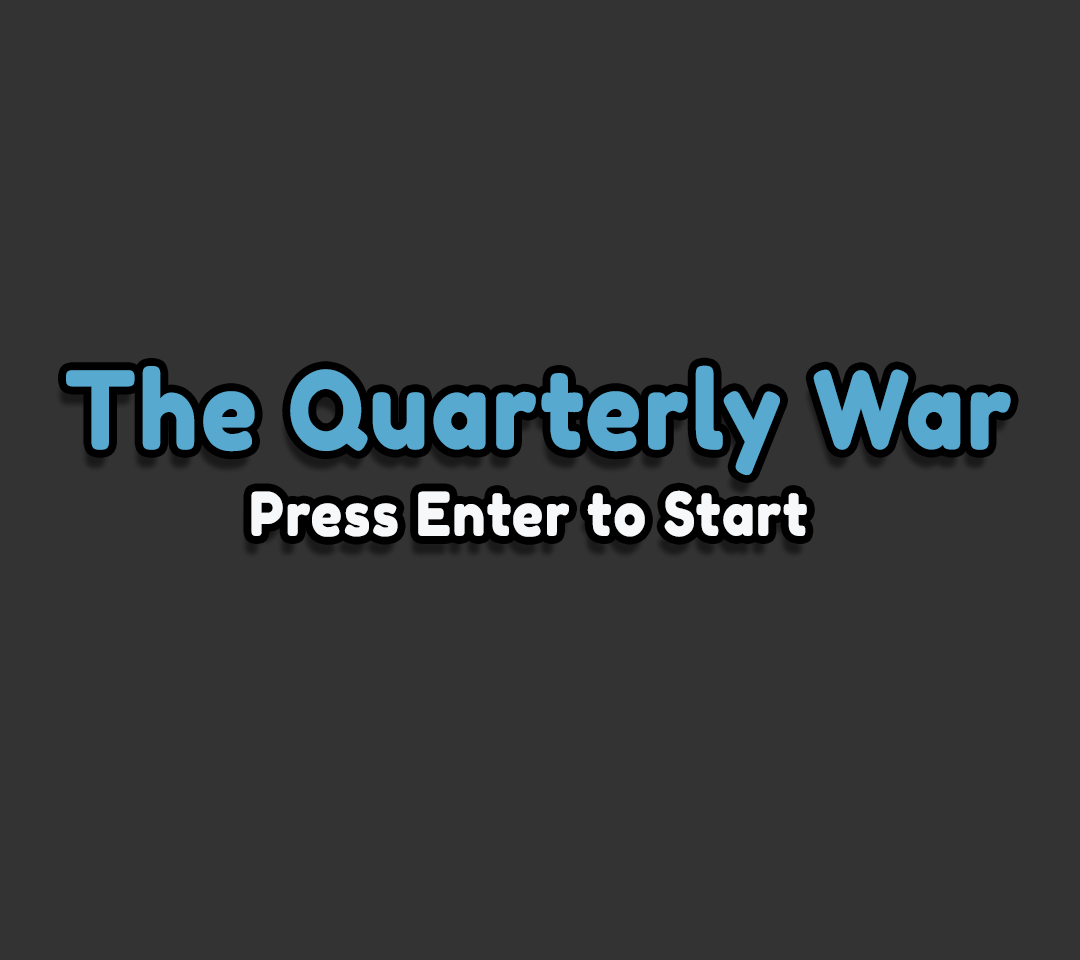
<style>
.page{position:relative;width:1080px;height:960px;background:#333333}
.page>*{position:absolute;margin:0}
.t1{font:60px "FredokaOne-Regular";letter-spacing:0.01em;color:#f7f8f9;font-weight:bold;scale:0.9 1}
.t2{font:107.5px "FredokaOne-Regular";letter-spacing:0.01em;color:#58a9cf;font-weight:bold;scale:0.9 1}
</style>
<div class="page">
<p class="t1" style="left:66px;top:365px;width:945px;height:172px"><span class="t2">The Quarterly War<br>         </span> Press Enter to Start</p>
</div>
